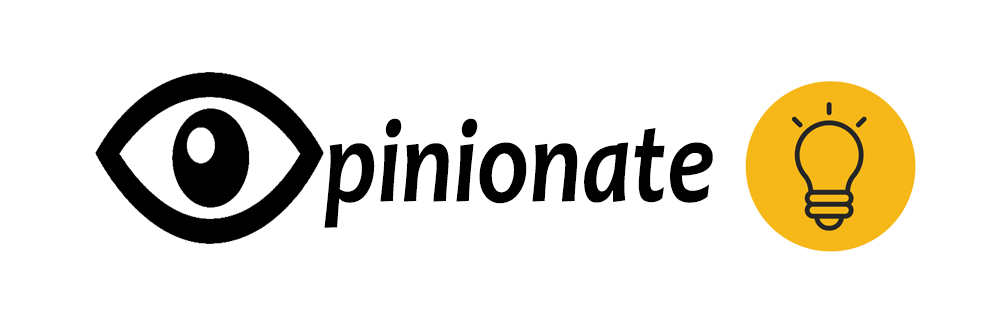
<style>
.page{position:relative;width:1000px;height:333px;background:#ffffff}
.page>*{position:absolute;margin:0}
.t1{font:120px "Candara-BoldItalic";color:#000000;scale:0.82 1}
</style>
<div class="page">
<p class="t1" style="left:324px;top:118px;width:389px;height:110px">pinionate</p>
</div>
